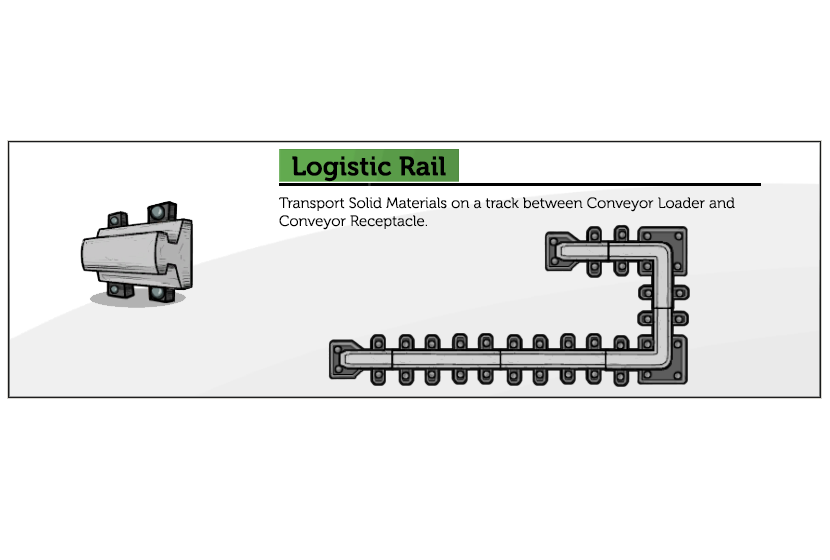
<style>
.page{position:relative;width:830px;height:560px;background:#ffffff}
.page>*{position:absolute;margin:0}
.t1{font:26.7px "Museo-700";color:#000000}
.t2{font:15px "Museo-300";color:#000000}
</style>
<div class="page">
<p class="t1" style="left:292px;top:156px;width:154px;height:26px">Logistic Rail</p>
<p class="t2" style="left:279px;top:197px;width:456px;height:33px">Transport Solid Materials on a track between Conveyor Loader and Conveyor Receptacle.</p>
</div>
